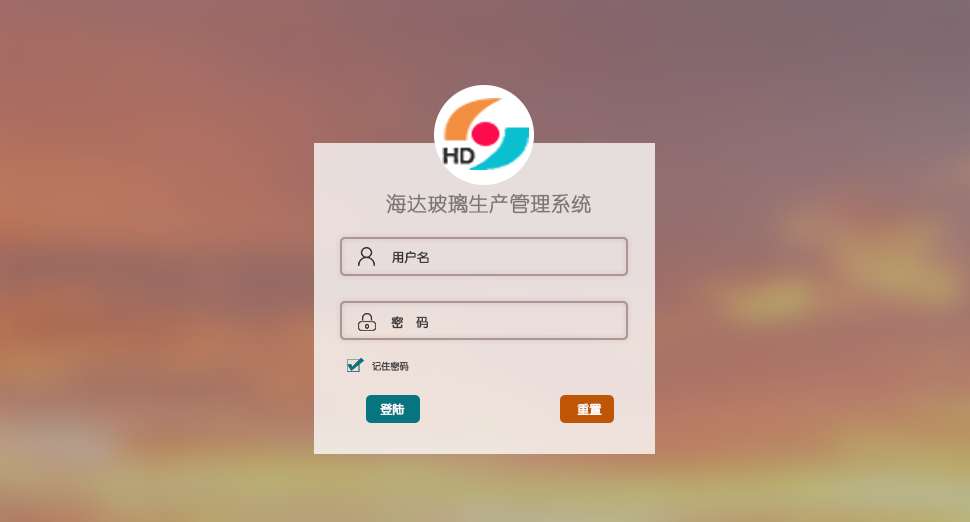
<style>
.page{position:relative;width:970px;height:522px}
.page>*{position:absolute;margin:0}
.t1{font:20px "YouYuan";color:#797575;font-weight:bold}
.t2{font:12px "YouYuan";color:#2c2b2b;font-weight:bold}
.t3{font:12px "YouYuan";color:#3c3737;font-weight:bold}
.t4{font:9px "YouYuan";color:#4b4b4b;font-weight:bold}
.t5{font:12px "YouYuan";color:#ffffff;font-weight:bold}
</style>
<div class="page">
<p class="t1" style="left:386px;top:193px;width:205px;height:21px">海达玻璃生产管理系统</p>
<p class="t2" style="left:392px;top:251px;width:37px;height:13px">用户名</p>
<p class="t3" style="left:391px;top:316px;width:37px;height:13px">密  码</p>
<p class="t4" style="left:372px;top:361px;width:37px;height:10px">记住密码</p>
<p class="t5" style="left:380px;top:403px;width:25px;height:13px">登陆</p>
<p class="t5" style="left:577px;top:403px;width:25px;height:12px">重置</p>
</div>
